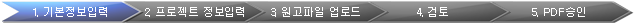
<style>
.page{position:relative;width:634px;height:24px}
.page>*{position:absolute;margin:0}
.t1{font:11px "Dotum";letter-spacing:-0.01em;color:#ffffff}
</style>
<div class="page">
<p class="t1" style="left:33px;top:7px;width:552px;height:10px">1. 기본정보입력         2. 프로젝트 정보입력      3. 원고파일 업로드              4. 검토                     5. PDF승인</p>
</div>
